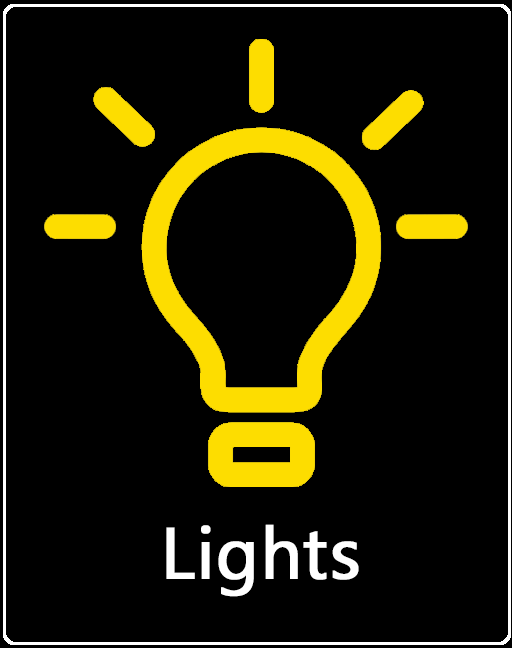
<style>
.page{position:relative;width:512px;height:648px;background:#000000}
.page>*{position:absolute;margin:0}
.t1{font:72px "Gadugi";color:#ffffff;font-weight:bold}
</style>
<div class="page">
<p class="t1" style="left:166px;top:524px;width:193px;height:73px">Lights</p>
</div>
